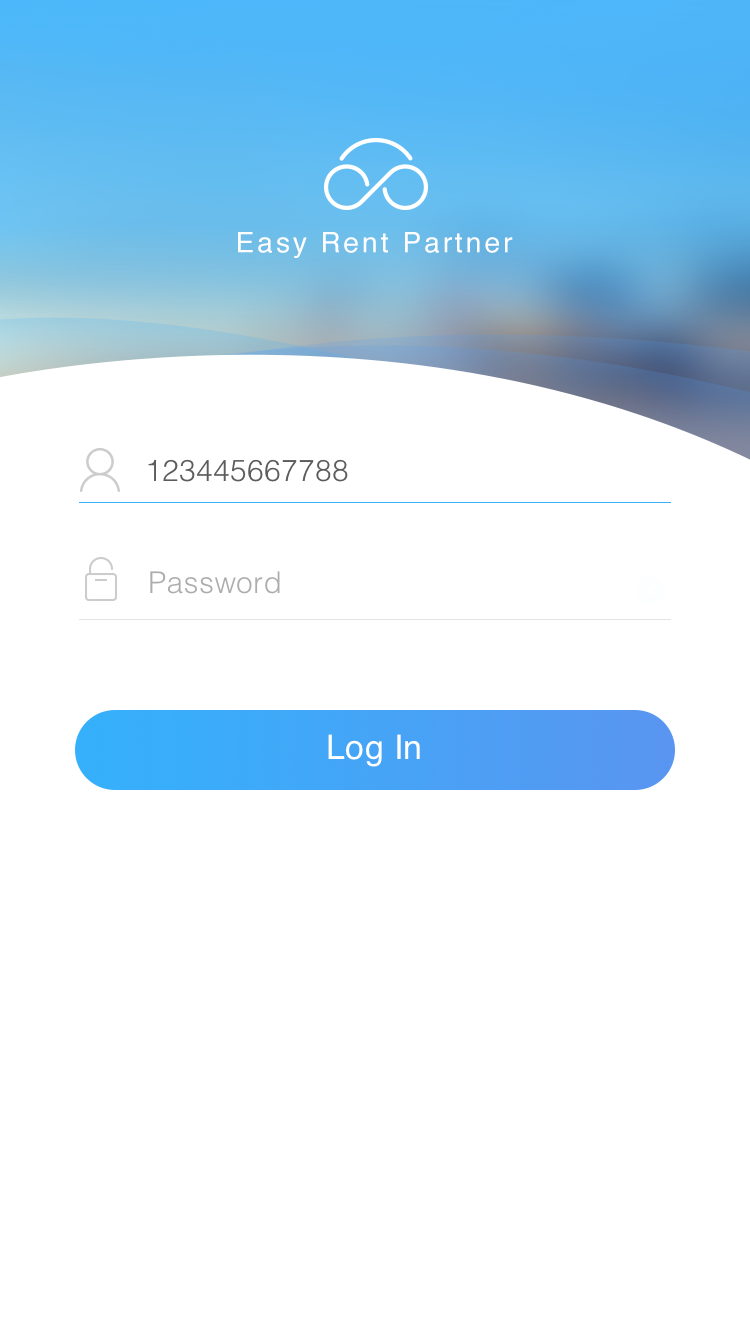
<style>
.page{position:relative;width:750px;height:1334px;background:#ffffff}
.page>*{position:absolute;margin:0}
.t1{font:28px "Helvetica";letter-spacing:0.1em;color:#ffffff}
.t2{font:30px "Helvetica-Light";letter-spacing:0.01em;color:#5c5c5c}
.t3{font:30px "Helvetica-Light";letter-spacing:0.01em;color:#999999}
.t4{font:34px "Helvetica";letter-spacing:0.01em;color:#ffffff}
</style>
<div class="page">
<p class="t1" style="left:238px;top:232px;width:275px;height:26px">Easy Rent Partner</p>
<p class="t2" style="left:148px;top:459px;width:200px;height:23px">123445667788</p>
<p class="t3" style="left:150px;top:571px;width:130px;height:23px;opacity:0.8">Password</p>
<p class="t4" style="left:328px;top:734px;width:92px;height:33px">Log In</p>
</div>
